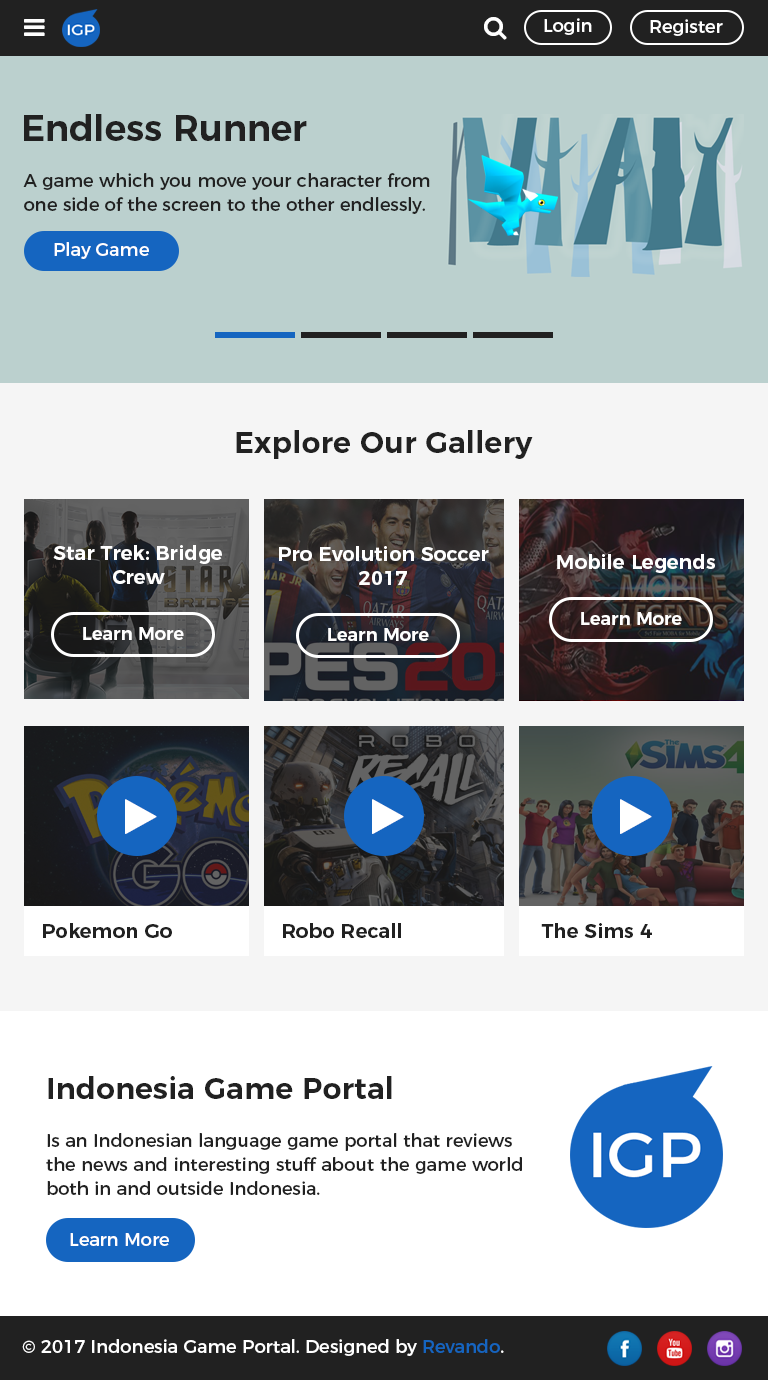
<style>
.page{position:relative;width:768px;height:1380px;background:#ffffff}
.page>*{position:absolute;margin:0}
.t1{font:18px "Montserrat-Regular";color:#ffffff}
.t2{font:36px "Montserrat-SemiBold";color:#212121}
.t3{font:18px/24px "Montserrat-Regular";color:#212121}
.t4{font:30px "Montserrat-SemiBold";color:#212121}
.t5{font:20px/24px "Montserrat-SemiBold";color:#ffffff}
.t6{font:20px "Montserrat-SemiBold";color:#ffffff}
.t7{font:18px "Montserrat-SemiBold";color:#ffffff}
.t8{font:20px "Montserrat-SemiBold";color:#212121}
.t9{font:18px "Montserrat-Regular";color:#1565c0}
</style>
<div class="page">
<p class="t1" style="left:544px;top:18px;width:48px;height:17px">Login</p>
<p class="t1" style="left:650px;top:19px;width:73px;height:17px">Register</p>
<p class="t2" style="left:24px;top:114px;width:283px;height:27px">Endless Runner</p>
<p class="t3" style="left:23px;top:173px;width:407px;height:41px">A game which you move your character from<br>one side of the screen to the other endlessly.</p>
<p class="t1" style="left:54px;top:242px;width:95px;height:17px">Play Game</p>
<p class="t4" style="left:236px;top:430px;width:297px;height:29px">Explore Our Gallery</p>
<p class="t5" style="left:53px;top:545px;width:169px;height:39px;text-align:center">Star Trek: Bridge<br>Crew</p>
<p class="t5" style="left:279px;top:546px;width:210px;height:39px;text-align:center">Pro Evolution Soccer<br>2017</p>
<p class="t6" style="left:557px;top:554px;width:158px;height:19px">Mobile Legends</p>
<p class="t7" style="left:581px;top:612px;width:101px;height:13px">Learn More</p>
<p class="t7" style="left:83px;top:627px;width:101px;height:13px">Learn More</p>
<p class="t7" style="left:328px;top:628px;width:101px;height:13px">Learn More</p>
<p class="t8" style="left:43px;top:923px;width:129px;height:15px">Pokemon Go</p>
<p class="t8" style="left:283px;top:923px;width:118px;height:15px">Robo Recall</p>
<p class="t8" style="left:541px;top:923px;width:111px;height:15px">The Sims 4</p>
<p class="t4" style="left:48px;top:1076px;width:344px;height:23px">Indonesia Game Portal</p>
<p class="t3" style="left:46px;top:1133px;width:476px;height:62px">Is an Indonesian language game portal that reviews<br>the news and interesting stuff about the game world<br>both in and outside Indonesia.</p>
<p class="t1" style="left:70px;top:1233px;width:99px;height:13px">Learn More</p>
<p class="t1" style="left:22px;top:1339px;width:482px;height:17px">© 2017 Indonesia Game Portal. Designed by <span class="t9">Revando</span>.</p>
</div>
